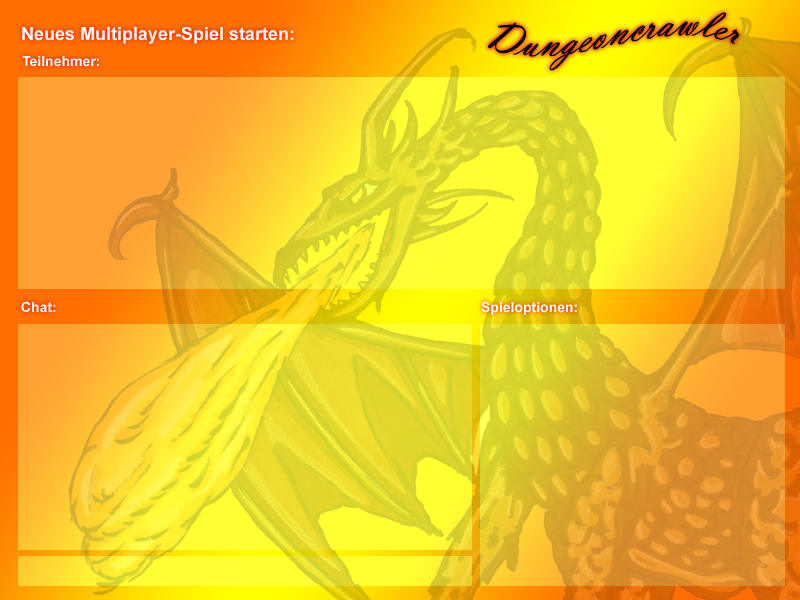
<style>
.page{position:relative;width:800px;height:600px}
.page>*{position:absolute;margin:0}
.t1{font:48px "VladimirScript";color:#000000}
.t2{font:18px "Arial-BoldMT";color:#ffffff}
.t3{font:14px "Arial-BoldMT";color:#ffffff}
</style>
<div class="page">
<p class="t1" style="left:488px;top:12px;width:251px;height:59px">Dungeoncrawler</p>
<p class="t2" style="left:22px;top:26px;width:272px;height:18px">Neues Multiplayer-Spiel starten:</p>
<p class="t3" style="left:22px;top:56px;width:77px;height:11px">Teilnehmer:</p>
<p class="t3" style="left:21px;top:301px;width:35px;height:12px">Chat:</p>
<p class="t3" style="left:481px;top:301px;width:96px;height:14px">Spieloptionen:</p>
</div>
